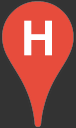
<style>
.page{position:relative;width:76px;height:128px;background:#333333}
.page>*{position:absolute;margin:0}
.t1{font:48px "Arial-BoldMT";color:#ffffff}
</style>
<div class="page">
<p class="t1" style="left:24px;top:20px;width:28px;height:36px">H</p>
</div>
